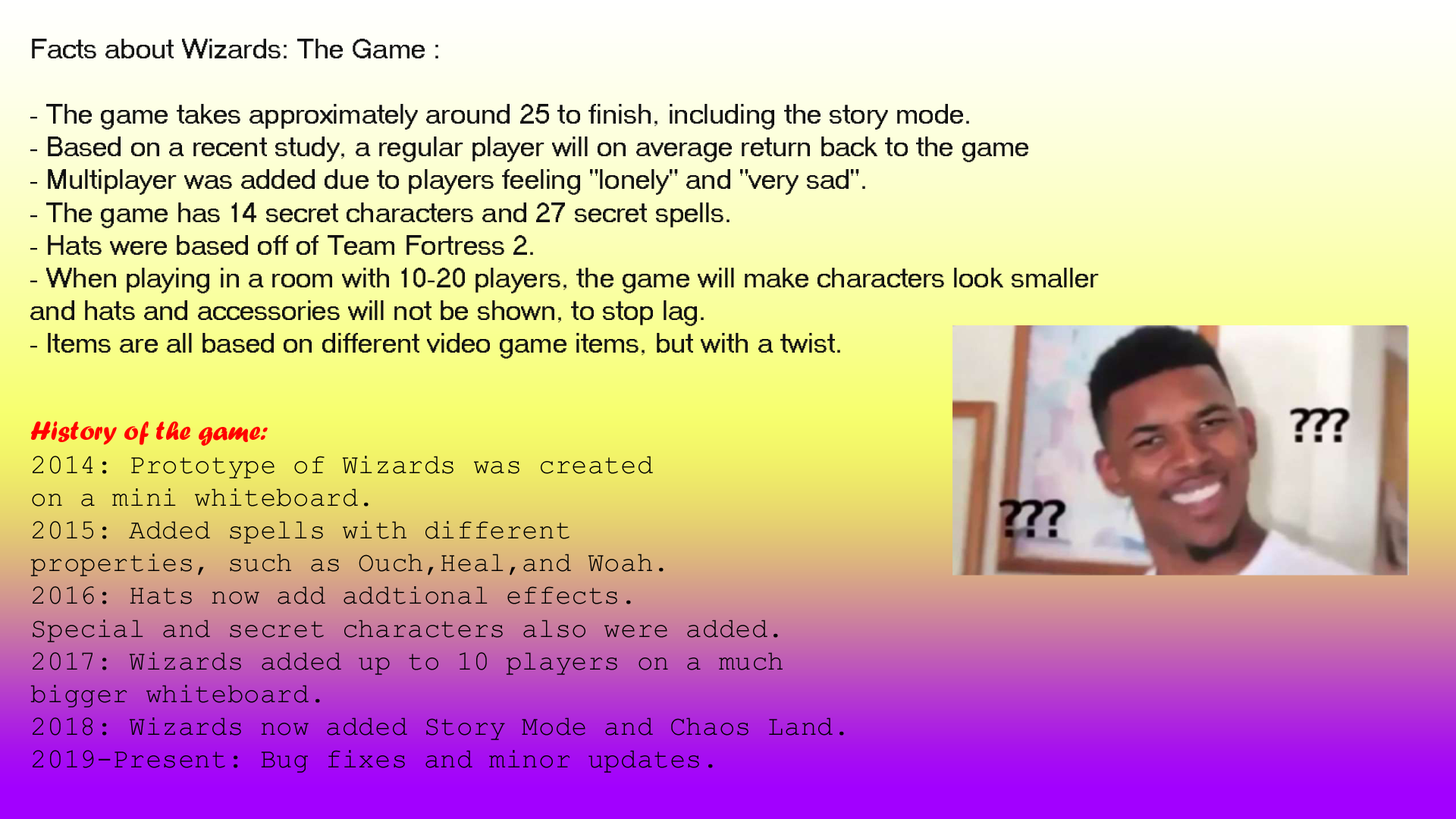
<style>
.page{position:relative;width:1456px;height:819px}
.page>*{position:absolute;margin:0}
.t1{font:27.3px "MS Sans Serif";color:#111111}
.t2{font:27.3px "CourierNewPSMT";color:#000000}
.t3{font:27.3px "ForteMT";color:#ff0000}
</style>
<div class="page">
<p class="t1" style="left:30px;top:39px;width:1069px;height:320px">Facts about Wizards: The Game : <br><br>- The game takes approximately around 25 to finish, including the story mode. <br>- Based on a recent study, a regular player will on average return back to the game<br>- Multiplayer was added due to players feeling "lonely" and "very sad". <br>- The game has 14 secret characters and 27 secret spells.<br>- Hats were based off of Team Fortress 2.<br>- When playing in a room with 10-20 players, the game will make characters look smaller<br>and hats and accessories will not be shown, to stop lag.<br>- Items are all based on different video game items, but with a twist.</p>
<p class="t2" style="left:30px;top:421px;width:814px;height:352px"><span class="t3">History of the game:<br></span>2014: Prototype of Wizards was created<br>on a mini whiteboard.<br>2015: Added spells with different <br>properties, such as Ouch,Heal,and Woah.<br>2016: Hats now add addtional effects. <br>Special and secret characters also were added.<br>2017: Wizards added up to 10 players on a much<br>bigger whiteboard.<br>2018: Wizards now added Story Mode and Chaos Land.<br>2019-Present: Bug fixes and minor updates.</p>
</div>
